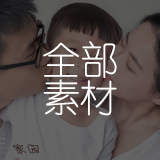
<style>
.page{position:relative;width:160px;height:160px}
.page>*{position:absolute;margin:0}
.t1{font:38px/38px "YouYuan";color:#ffffff}
</style>
<div class="page">
<p class="t1" style="left:43px;top:41px;width:74px;height:75px;text-align:center">全部<br>素材</p>
</div>
